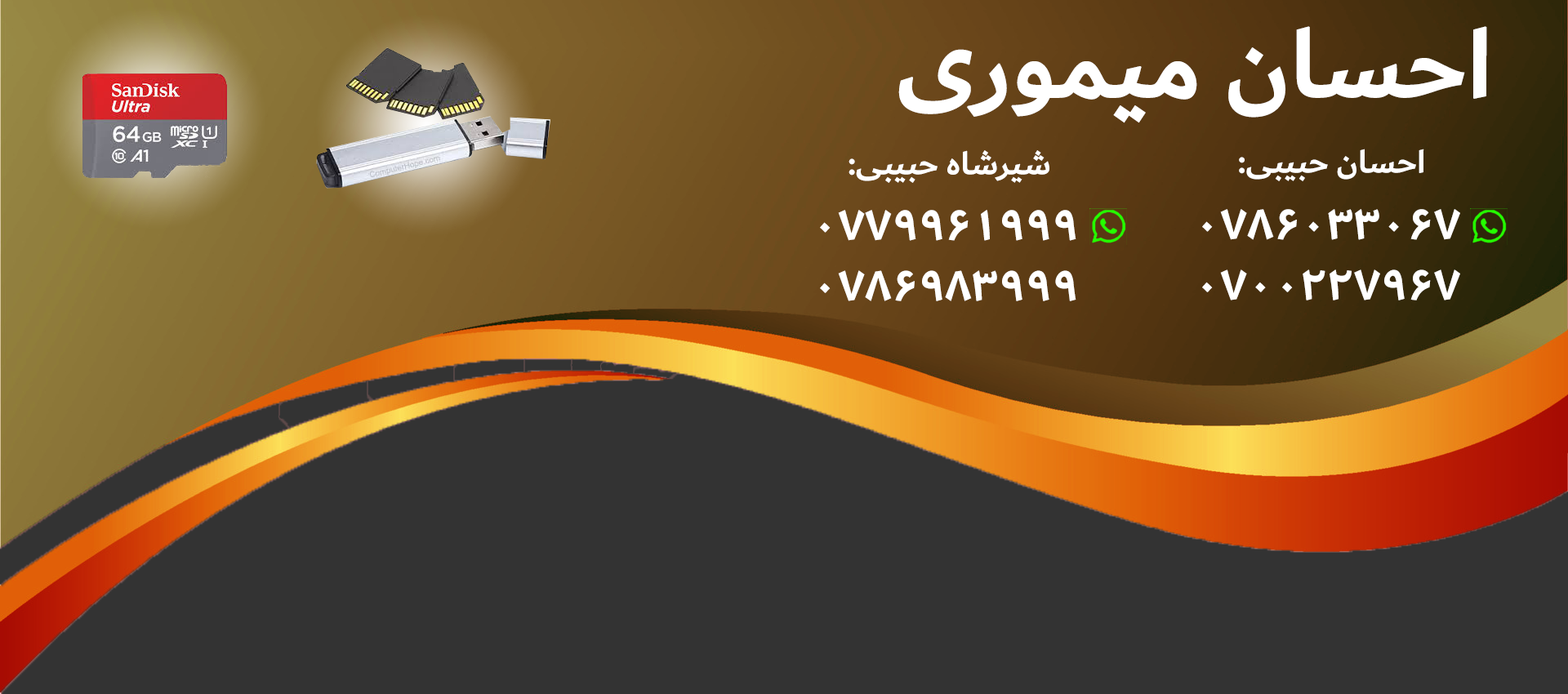
<style>
.page{position:relative;width:1568px;height:694px;background:#333333}
.page>*{position:absolute;margin:0}
.t1{font:102.9px "Dubai-Bold";color:#ffffff}
.t2{font:34.3px "Dubai-Bold";color:#ffffff}
.t3{font:50.6px "Dubai-Bold";color:#ffffff}
</style>
<div class="page">
<p class="t1" style="left:898px;top:26px;width:589px;height:97px">احسان میموری</p>
<p class="t2" style="left:1239px;top:149px;width:185px;height:32px">احسان حبیبی:</p>
<p class="t2" style="left:849px;top:150px;width:200px;height:33px">شیرشاه حبیبی:</p>
<p class="t3" style="left:820px;top:210px;width:256px;height:91px;text-align:center">۰۷۷۹۹۶۱۹۹۹<br>۰۷۸۶۹۸۳۹۹۹</p>
<p class="t3" style="left:1202px;top:209px;width:258px;height:92px;text-align:center">۰۷۸۶۰۳۳۰۶۷<br>۰۷۰۰۲۲۷۹۶۷</p>
</div>
